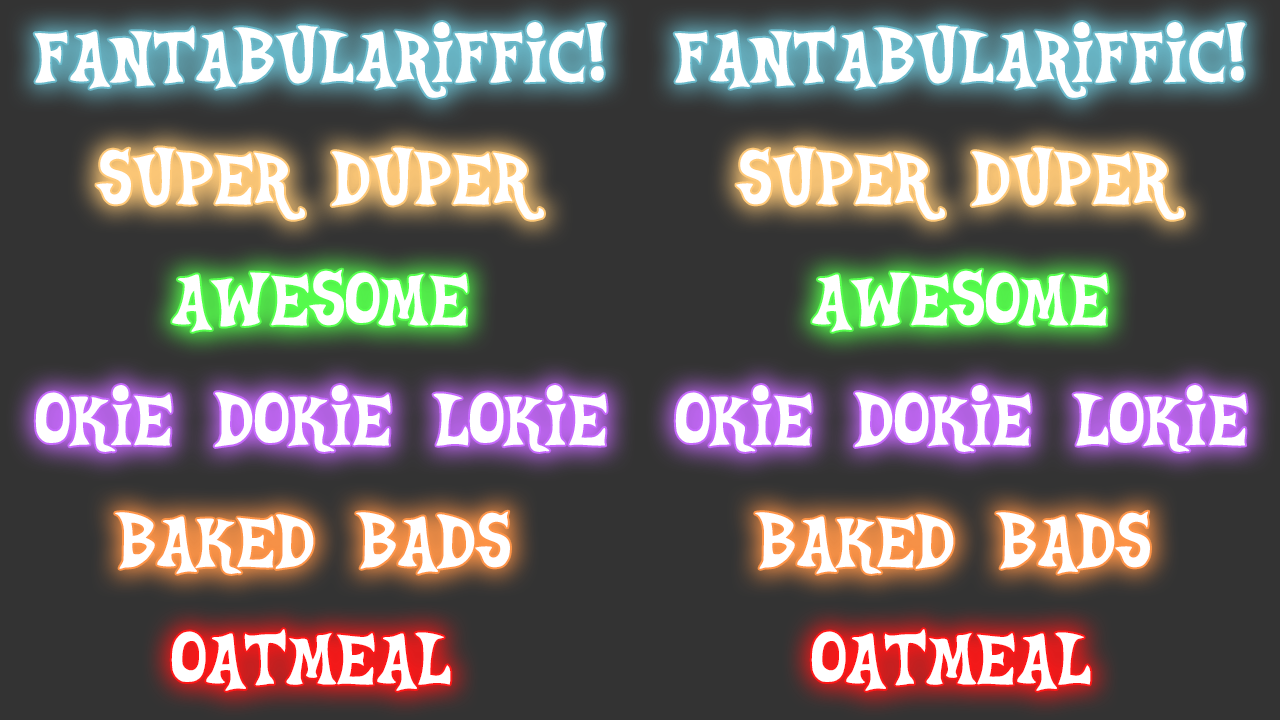
<style>
.page{position:relative;width:1280px;height:720px;background:#333333}
.page>*{position:absolute;margin:0}
.t1{font:80px "CelestiaReduxMedium";color:#ffffff}
</style>
<div class="page">
<p class="t1" style="left:34px;top:22px;width:572px;height:76px">FANTABULARIFFIC!</p>
<p class="t1" style="left:674px;top:22px;width:572px;height:76px">FANTABULARIFFIC!</p>
<p class="t1" style="left:96px;top:147px;width:448px;height:73px">SUPER DUPER</p>
<p class="t1" style="left:736px;top:147px;width:448px;height:73px">SUPER DUPER</p>
<p class="t1" style="left:172px;top:269px;width:296px;height:63px">AWESOME</p>
<p class="t1" style="left:812px;top:269px;width:296px;height:63px">AWESOME</p>
<p class="t1" style="left:35px;top:385px;width:572px;height:67px">OKIE DOKIE LOKIE</p>
<p class="t1" style="left:675px;top:385px;width:572px;height:67px">OKIE DOKIE LOKIE</p>
<p class="t1" style="left:115px;top:511px;width:395px;height:63px">BAKED BADS</p>
<p class="t1" style="left:755px;top:511px;width:395px;height:63px">BAKED BADS</p>
<p class="t1" style="left:171px;top:629px;width:280px;height:62px">OATMEAL</p>
<p class="t1" style="left:811px;top:629px;width:280px;height:62px">OATMEAL</p>
</div>
